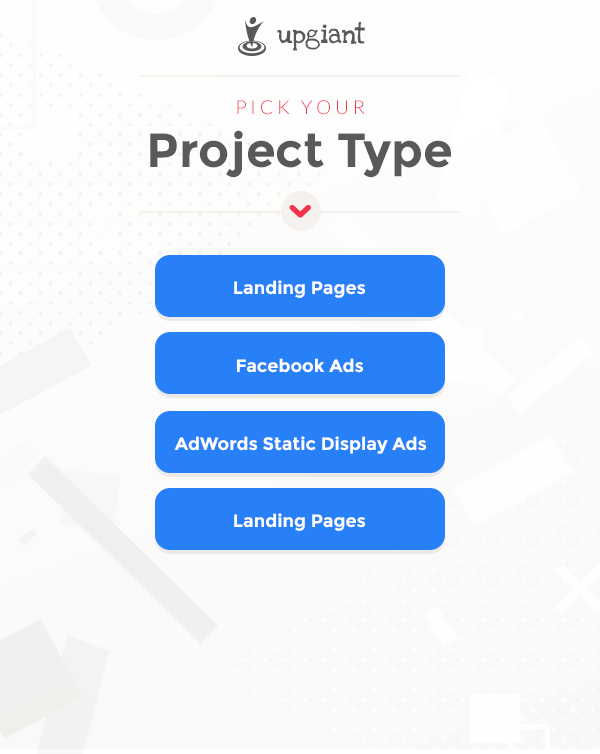
<style>
.page{position:relative;width:600px;height:754px}
.page>*{position:absolute;margin:0}
.t1{font:19.2px "LoveYaLikeASisterSolid";color:#58595b}
.t2{font:19.2px "Lato-Light";color:#f4314a;text-transform:uppercase}
.t3{font:48px "Montserrat-Bold";color:#58595b}
.t4{font:18px "Montserrat-Bold";color:#fefefe}
</style>
<div class="page">
<p class="t1" style="left:277px;top:22px;width:88px;height:29px">upgiant</p>
<p class="t2" style="left:237px;top:100px;width:128px;height:15px">P I C K   Y O U R</p>
<p class="t3" style="left:150px;top:130px;width:301px;height:48px">Project Type</p>
<p class="t4" style="left:234px;top:280px;width:131px;height:18px">Landing Pages</p>
<p class="t4" style="left:237px;top:358px;width:126px;height:15px">Facebook Ads</p>
<p class="t4" style="left:174px;top:436px;width:252px;height:18px">AdWords Static Display Ads</p>
<p class="t4" style="left:234px;top:513px;width:131px;height:18px">Landing Pages</p>
</div>
